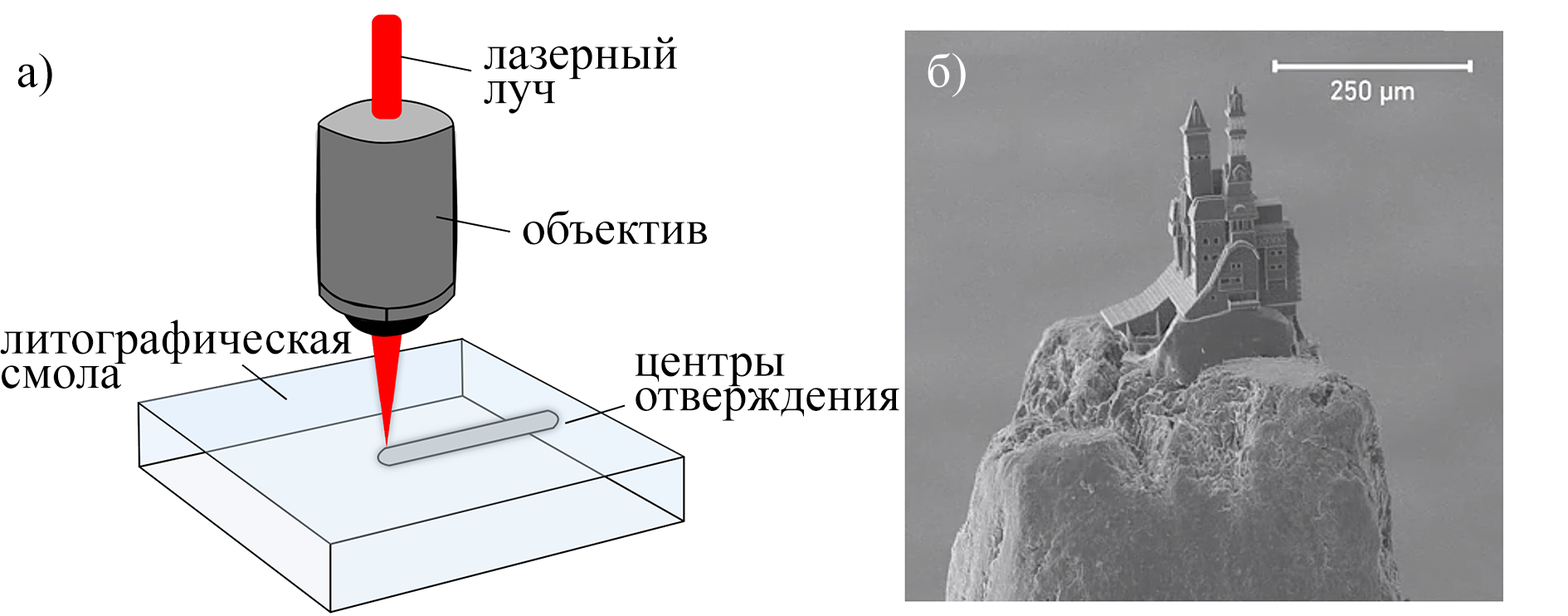
<style>
.page{position:relative;width:1568px;height:616px;background:#ffffff}
.page>*{position:absolute;margin:0}
.t1{font:48.4px/34.6px "TimesNewRomanPSMT";color:#000000}
.t2{font:48.4px "TimesNewRomanPSMT";color:#000000}
.t3{font:48.4px "TimesNewRomanPSMT";color:#ffffff}
</style>
<div class="page">
<p class="t1" style="left:484px;top:37px;width:193px;height:77px">лазерный<br>луч</p>
<p class="t2" style="left:17px;top:53px;width:35px;height:44px">а)</p>
<p class="t3" style="left:928px;top:53px;width:38px;height:44px">б)</p>
<p class="t2" style="left:523px;top:210px;width:184px;height:35px">объектив</p>
<p class="t1" style="left:0px;top:319px;width:352px;height:69px">литографическая<br>смола</p>
<p class="t1" style="left:635px;top:353px;width:264px;height:68px">центры<br>отверждения</p>
</div>
